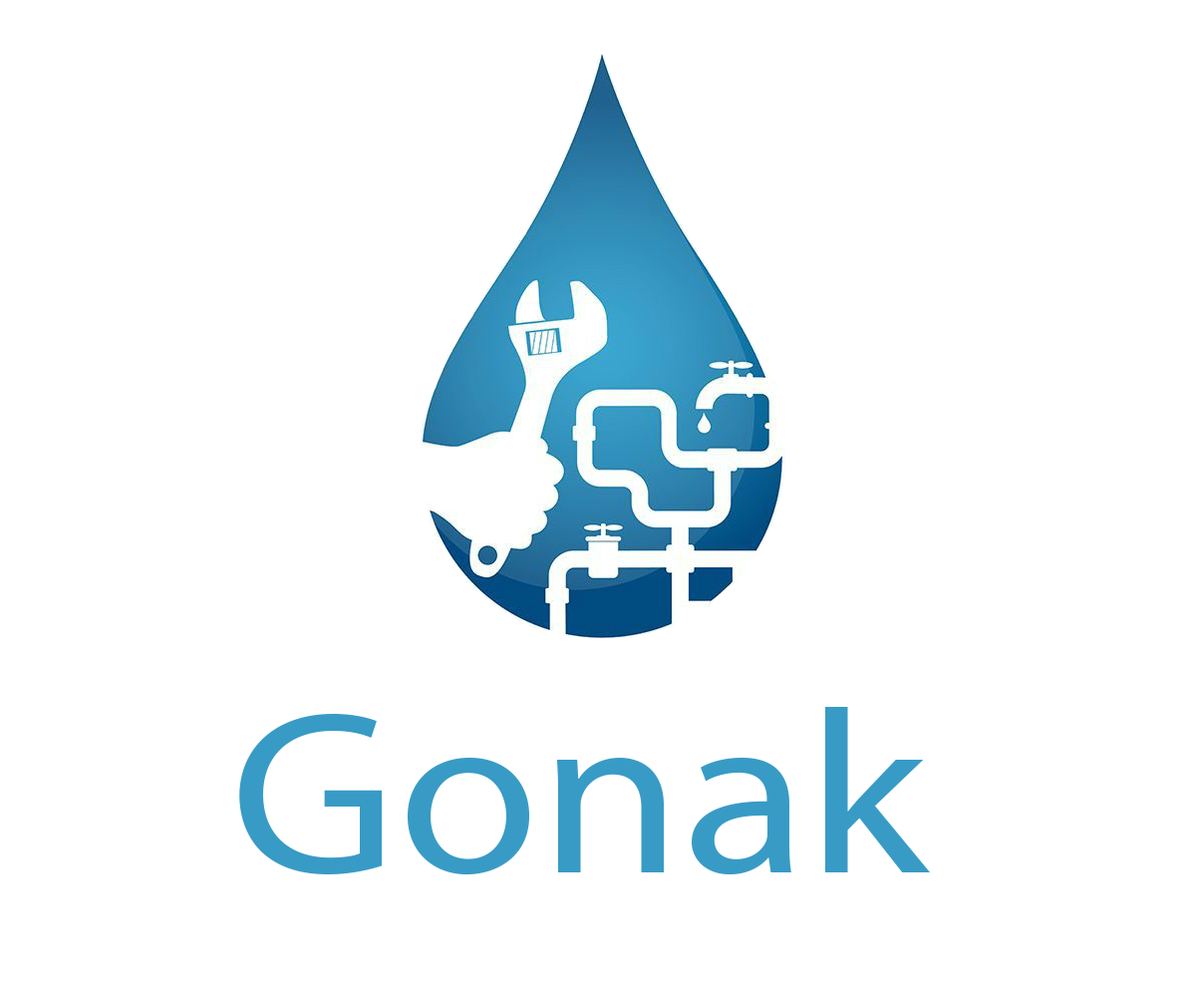
<style>
.page{position:relative;width:1196px;height:997px;background:#ffffff}
.page>*{position:absolute;margin:0}
.t1{font:232.5px "MyriadHebrew-Regular";color:#389bc5;scale:1.11 1}
</style>
<div class="page">
<p class="t1" style="left:239px;top:707px;width:691px;height:168px">Gonak</p>
</div>
